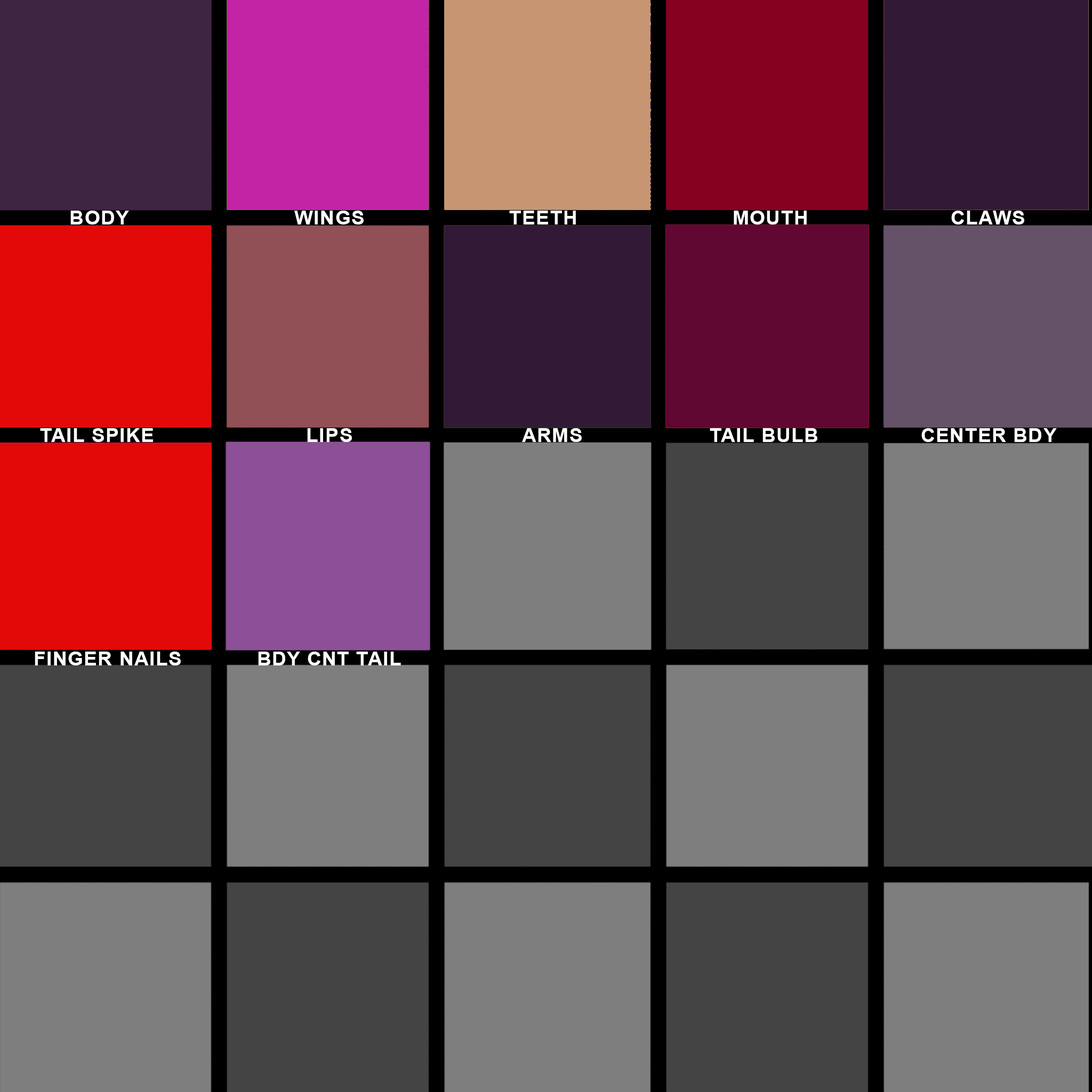
<style>
.page{position:relative;width:1092px;height:1092px;background:#7e7e7e}
.page>*{position:absolute;margin:0}
.t1{font:19.4px "Arial-BoldMT";letter-spacing:0.05em;color:#ffffff}
</style>
<div class="page">
<p class="t1" style="left:70px;top:211px;width:59px;height:13px">BODY</p>
<p class="t1" style="left:294px;top:211px;width:70px;height:13px">WINGS</p>
<p class="t1" style="left:509px;top:211px;width:67px;height:13px">TEETH</p>
<p class="t1" style="left:734px;top:211px;width:73px;height:13px">MOUTH</p>
<p class="t1" style="left:951px;top:211px;width:73px;height:13px">CLAWS</p>
<p class="t1" style="left:40px;top:428px;width:113px;height:14px">TAIL SPIKE</p>
<p class="t1" style="left:307px;top:428px;width:45px;height:14px">LIPS</p>
<p class="t1" style="left:522px;top:428px;width:60px;height:14px">ARMS</p>
<p class="t1" style="left:710px;top:428px;width:107px;height:14px">TAIL BULB</p>
<p class="t1" style="left:921px;top:428px;width:136px;height:14px">CENTER BDY</p>
<p class="t1" style="left:35px;top:652px;width:146px;height:13px">FINGER NAILS</p>
<p class="t1" style="left:258px;top:652px;width:143px;height:13px">BDY CNT TAIL</p>
</div>
